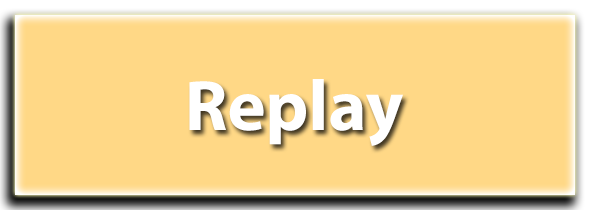
<style>
.page{position:relative;width:590px;height:210px;background:#ffd886}
.page>*{position:absolute;margin:0}
.t1{font:72px "MyriadPro-Bold";color:#ffffff}
</style>
<div class="page">
<p class="t1" style="left:189px;top:79px;width:214px;height:67px">Replay</p>
</div>
